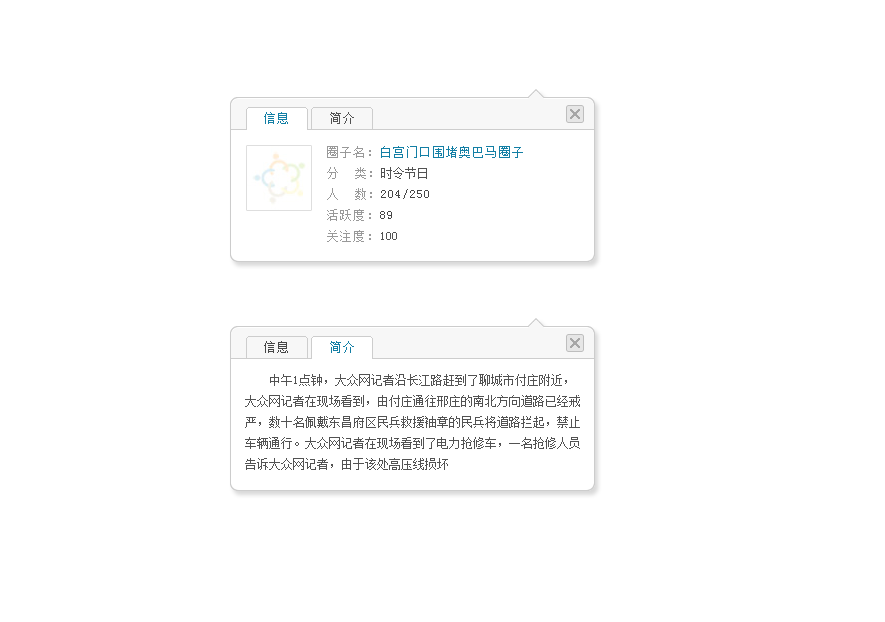
<style>
.page{position:relative;width:885px;height:622px;background:#ffffff}
.page>*{position:absolute;margin:0}
.t1{font:12px "SimSun";letter-spacing:0.1em;color:#137fa5}
.t2{font:12px "SimSun";letter-spacing:0.1em;color:#525252}
.t3{font:12px/21px "SimSun";letter-spacing:0.1em;color:#137fa5}
.t4{font:12px/21px "SimSun";letter-spacing:0.1em;color:#999999}
.t5{font:12px/21px "SimSun";color:#525252}
.t6{font:12px/21px "SimSun";letter-spacing:0.1em;color:#464646}
.t7{font:12px "SimSun";letter-spacing:0.1em;color:#464646}
</style>
<div class="page">
<p class="t1" style="left:264px;top:112px;width:24px;height:12px">信息</p>
<p class="t2" style="left:330px;top:112px;width:24px;height:12px">简介</p>
<p class="t3" style="left:327px;top:146px;width:196px;height:96px"><span class="t4">圈子名：</span>白宫门口围堵奥巴马圈子<br><span class="t4">分  类：</span><span class="t5">时令节日<br></span><span class="t4">人  数：</span><span class="t6">204/250<br></span><span class="t4">活跃度：</span><span class="t6">89<br></span><span class="t4">关注度：</span><span class="t5">100</span></p>
<p class="t7" style="left:264px;top:341px;width:24px;height:12px">信息</p>
<p class="t1" style="left:330px;top:341px;width:24px;height:12px">简介</p>
<p class="t5" style="left:245px;top:374px;width:335px;height:96px">中午1点钟，大众网记者沿长江路赶到了聊城市付庄附近，大众网记者在现场看到，由付庄通往邢庄的南北方向道路已经戒严，数十名佩戴东昌府区民兵救援袖章的民兵将道路拦起，禁止车辆通行。大众网记者在现场看到了电力抢修车，一名抢修人员告诉大众网记者，由于该处高压线损坏</p>
</div>
